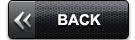
<style>
.page{position:relative;width:135px;height:40px}
.page>*{position:absolute;margin:0}
.t1{font:15px "Arial-BoldMT";color:#ffffff;text-transform:uppercase}
</style>
<div class="page">
<p class="t1" style="left:58px;top:14px;width:43px;height:12px">Back</p>
</div>
